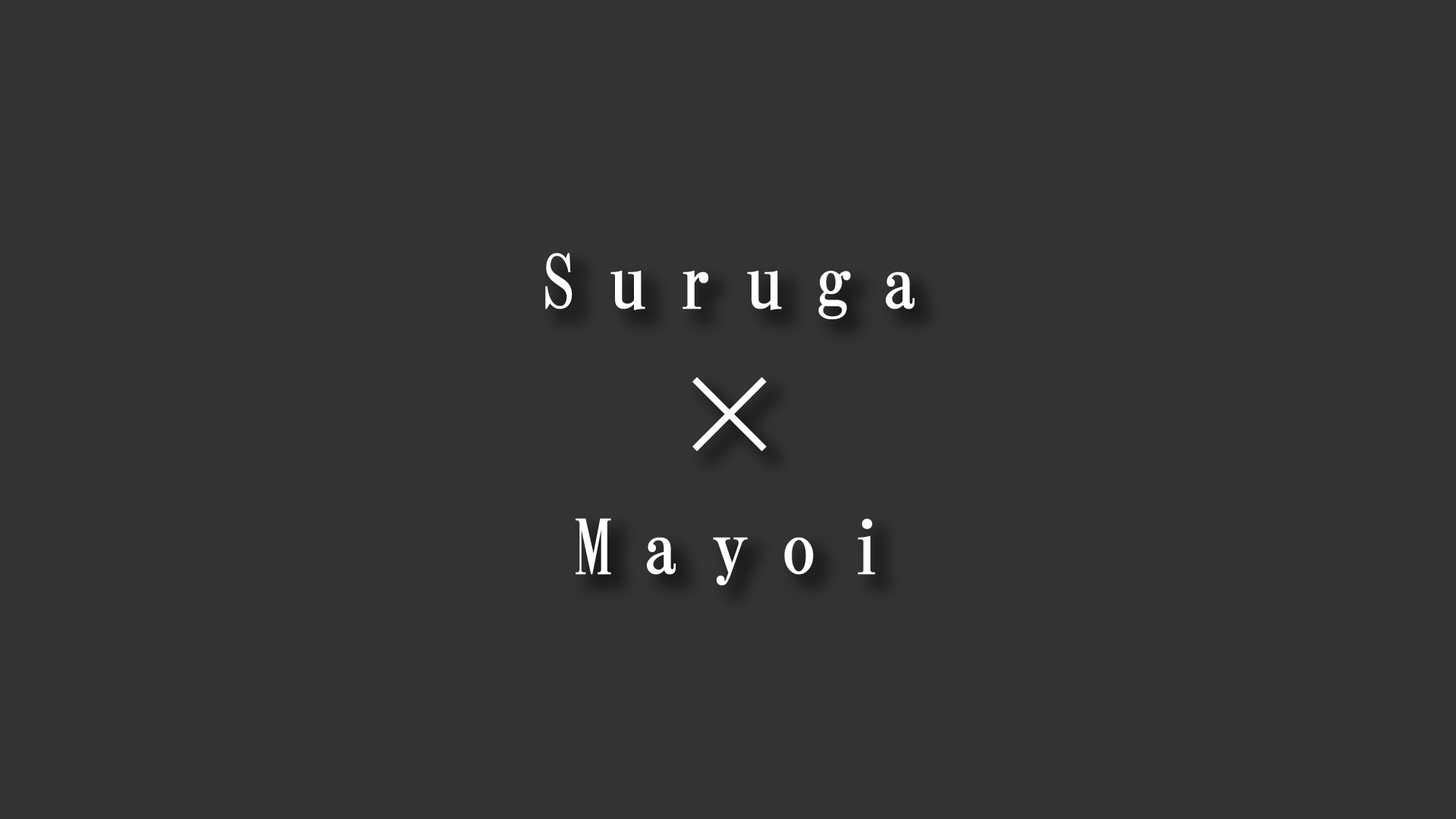
<style>
.page{position:relative;width:1456px;height:819px;background:#333333}
.page>*{position:absolute;margin:0}
.t1{font:75.8px/265.4px "HGMinchoB";letter-spacing:0.4em;color:#ffffff}
.t2{font:113.7px "HGMinchoB";letter-spacing:0.1em;color:#ffffff}
</style>
<div class="page">
<p class="t1" style="left:545px;top:253px;width:370px;height:332px;text-align:center">Suruga<br>Mayoi</p>
<p class="t2" style="left:692px;top:377px;width:75px;height:74px">×</p>
</div>
